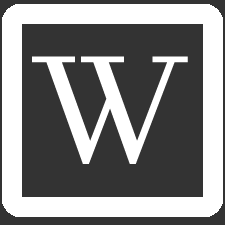
<style>
.page{position:relative;width:225px;height:225px;background:#333333}
.page>*{position:absolute;margin:0}
.t1{font:150px "JavaneseText";letter-spacing:0.035em;color:#ffffff}
</style>
<div class="page">
<p class="t1" style="left:32px;top:56px;width:156px;height:108px">W</p>
</div>
